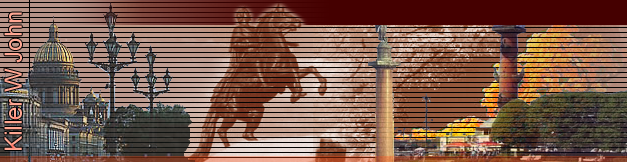
<style>
.page{position:relative;width:627px;height:162px}
.page>*{position:absolute;margin:0}
.t1{font:24px "ArialMT";color:#ffa793}
</style>
<div class="page">
<p class="t1" style="left:4px;top:12px;width:18px;height:138px;rotate:-90deg">Killer W John</p>
</div>
